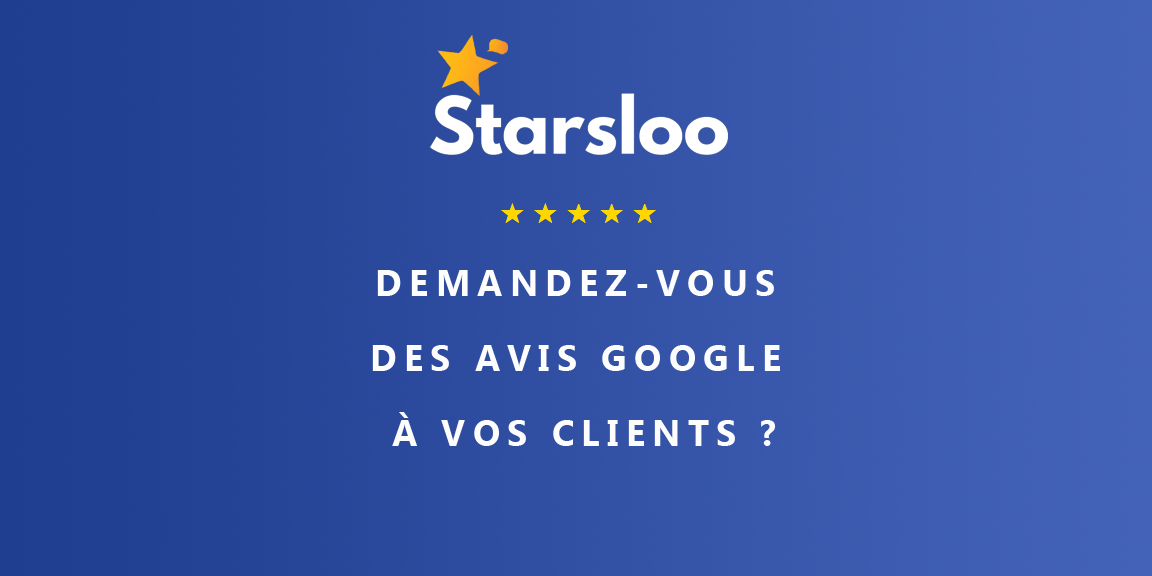
<style>
.page{position:relative;width:1152px;height:576px}
.page>*{position:absolute;margin:0}
.t1{font:36px/75px "MicrosoftTaiLe-Bold";letter-spacing:0.2em;color:#fdfdfd;text-transform:uppercase}
</style>
<div class="page">
<p class="t1" style="left:372px;top:270px;width:408px;height:176px;text-align:center">Demandez-vous <br>des avis google <br>à vos clients ?</p>
</div>
